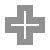
<style>
.page{position:relative;width:50px;height:50px;background:#ffffff}
.page>*{position:absolute;margin:0}
.t1{font:96px "Phosphate-Inline";color:#919191}
</style>
<div class="page">
<p class="t1" style="left:5px;top:5px;width:40px;height:40px">+</p>
</div>
